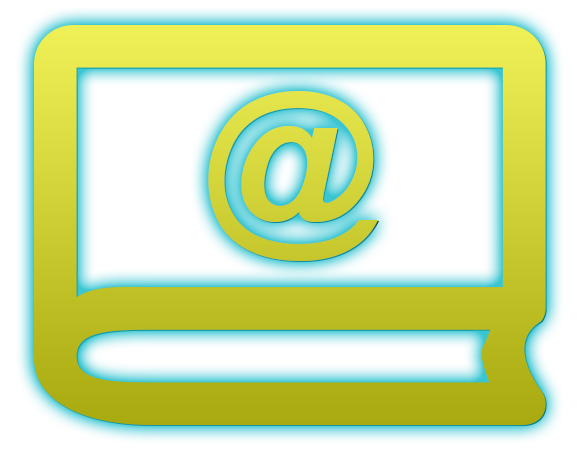
<style>
.page{position:relative;width:580px;height:450px;background:#ffffff}
.page>*{position:absolute;margin:0}
.t1{font:180px "Arial-BoldMT";letter-spacing:0.1em;color:#d5d53c}
</style>
<div class="page">
<p class="t1" style="left:208px;top:91px;width:170px;height:170px">@</p>
</div>
